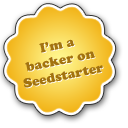
<style>
.page{position:relative;width:128px;height:128px;background:#ffffff}
.page>*{position:absolute;margin:0}
.t1{font:13px "CooperBlackStd";color:#a3730f}
.t2{font:13px "CooperBlackStd"}
</style>
<div class="page">
<p class="t1" style="left:23px;top:39px;width:80px;height:49px;text-align:center;rotate:-12deg">I’m a<br>backer on<br>Seedstarter</p>
<p class="t2" style="left:24px;top:40px;width:80px;height:49px;text-align:center;rotate:-12deg">I’m a<br>backer on<br>Seedstarter</p>
</div>
